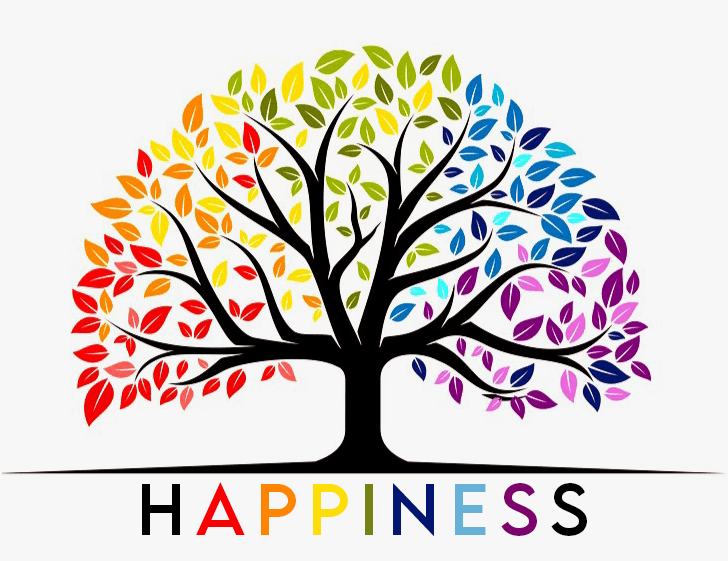
<style>
.page{position:relative;width:728px;height:561px;background:#f7f7f7}
.page>*{position:absolute;margin:0}
.t1{font:65.1px "LEMONMILK-Regular";letter-spacing:0.16em;color:#000000;text-transform:uppercase}
.t2{font:65.1px "LEMONMILK-Regular";letter-spacing:0.16em;color:#f70103;text-transform:uppercase}
.t3{font:65.1px "LEMONMILK-Regular";letter-spacing:0.16em;color:#fe8502;text-transform:uppercase}
.t4{font:65.1px "LEMONMILK-Regular";letter-spacing:0.16em;color:#fdde08;text-transform:uppercase}
.t5{font:65.1px "LEMONMILK-Regular";letter-spacing:0.16em;color:#768116;text-transform:uppercase}
.t6{font:65.1px "LEMONMILK-Regular";letter-spacing:0.16em;color:#021570;text-transform:uppercase}
.t7{font:65.1px "LEMONMILK-Regular";letter-spacing:0.16em;color:#67b1d9;text-transform:uppercase}
.t8{font:65.1px "LEMONMILK-Regular";letter-spacing:0.16em;color:#7c026c;text-transform:uppercase}
</style>
<div class="page">
<p class="t1" style="left:142px;top:482px;width:445px;height:54px">H<span class="t2">a</span><span class="t3">p</span><span class="t4">p</span><span class="t5">i</span><span class="t6">n</span><span class="t7">e</span><span class="t8">s</span>s</p>
</div>
